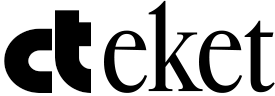
<style>
.page{position:relative;width:275px;height:96px;background:#ffffff}
.page>*{position:absolute;margin:0}
.t1{font:117px "CardinalFruit-Medium";letter-spacing:-0.025em;color:#000000;scale:1.11 1}
.t2{font:108.9px "SlugSingleW00-Regular";letter-spacing:0.025em;color:#000000;scale:1.11 1}
.t3{font:120px "SlugSingleW00-Regular";letter-spacing:0.025em;color:#000000}
</style>
<div class="page">
<p class="t1" style="left:104px;top:0px;width:171px;height:93px">eket</p>
<p class="t2" style="left:4px;top:10px;width:87px;height:83px">c<span class="t3">t</span></p>
</div>
